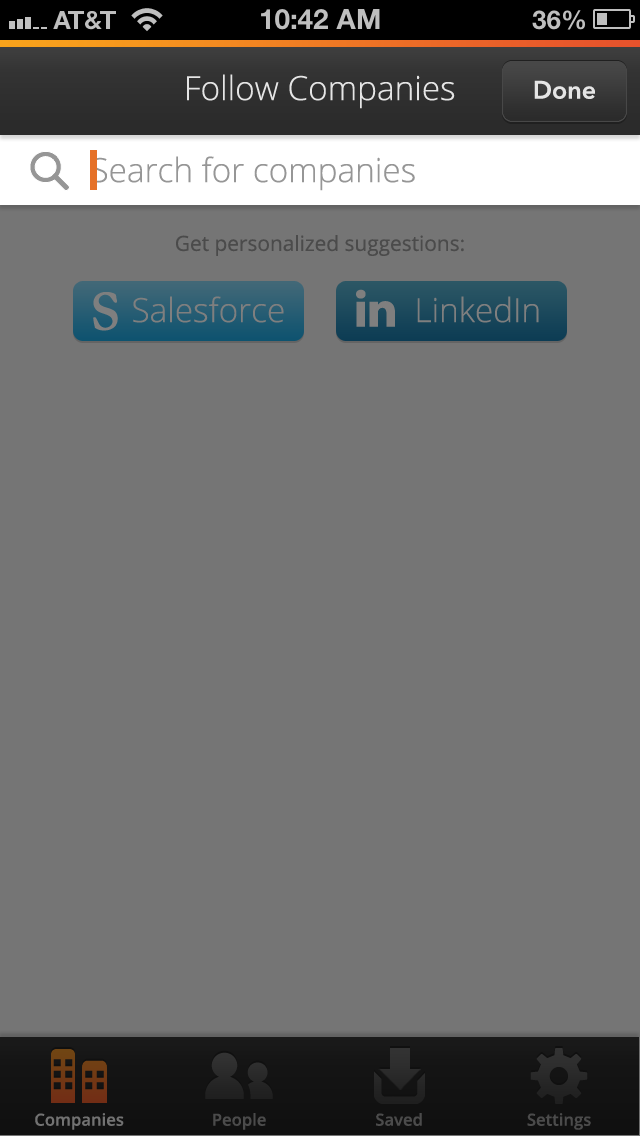
<style>
.page{position:relative;width:640px;height:1136px;background:#757575}
.page>*{position:absolute;margin:0}
.t1{font:33.3px "OpenSans-Light";color:#e5e5e5}
.t2{font:25px "AvenirNext-DemiBold";color:#e5e5e5}
.t3{font:33.3px "OpenSans-Light";color:#969696}
.t4{font:20.8px "OpenSans";color:#4b4b4b}
.t5{font:33.3px "OpenSans-Light";color:#7f7f7f}
.t6{font:16.7px "OpenSans-Semibold";color:#727272}
.t7{font:16.7px "OpenSans-Semibold";color:#4b4b4b}
</style>
<div class="page">
<p class="t1" style="left:187px;top:74px;width:268px;height:35px">Follow Companies</p>
<p class="t2" style="left:534px;top:80px;width:61px;height:19px">Done</p>
<p class="t3" style="left:92px;top:156px;width:323px;height:35px">Search for companies</p>
<p class="t4" style="left:176px;top:235px;width:288px;height:21px">Get personalized suggestions:</p>
<p class="t5" style="left:133px;top:296px;width:151px;height:27px">Salesforce</p>
<p class="t5" style="left:417px;top:296px;width:122px;height:27px">LinkedIn</p>
<p class="t6" style="left:35px;top:1113px;width:89px;height:17px">Companies</p>
<p class="t7" style="left:213px;top:1113px;width:53px;height:17px">People</p>
<p class="t7" style="left:376px;top:1113px;width:46px;height:13px">Saved</p>
<p class="t7" style="left:527px;top:1113px;width:64px;height:17px">Settings</p>
</div>
